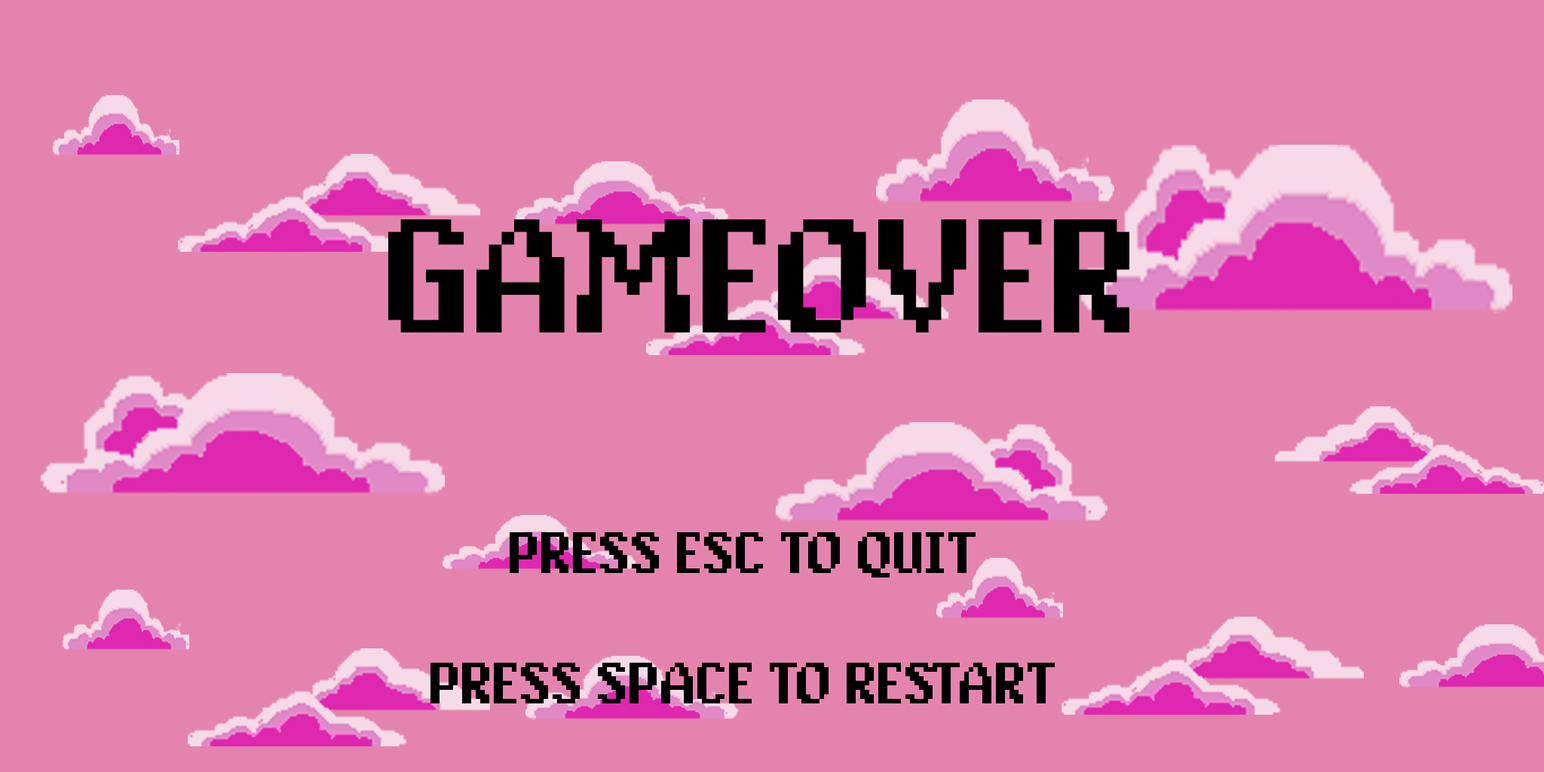
<style>
.page{position:relative;width:1544px;height:772px;background:#e484ae}
.page>*{position:absolute;margin:0}
.t1{font:150.8px "PixAntiqua";color:#000000}
.t2{font:54.3px "PixAntiqua";color:#000000}
</style>
<div class="page">
<p class="t1" style="left:388px;top:219px;width:742px;height:114px">GAMEOVER</p>
<p class="t2" style="left:431px;top:532px;width:624px;height:172px;text-align:center">PRESS ESC TO QUIT<br><br>PRESS SPACE TO RESTART</p>
</div>
